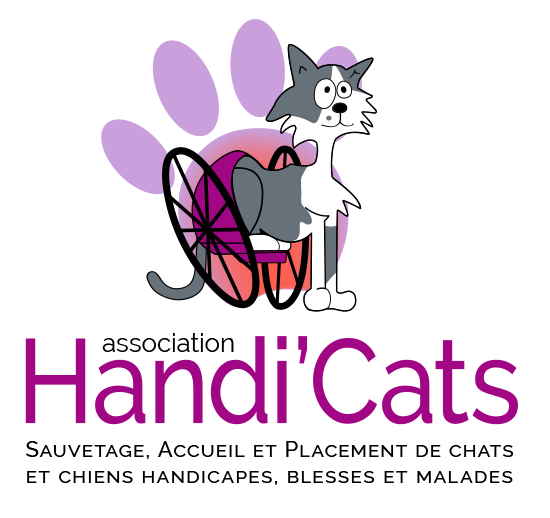
<style>
.page{position:relative;width:550px;height:518px;background:#ffffff}
.page>*{position:absolute;margin:0}
.t1{font:119.1px "Raleway-Medium";color:#a10684;scale:0.87 1}
.t2{font:26.5px "Raleway-Regular";color:#010101}
.t3{font:22.1px "Raleway-Medium";letter-spacing:0.05em;color:#000000;font-variant:small-caps}
.t4{font:22.1px "Raleway-Medium";letter-spacing:0.06em;color:#000000;font-variant:small-caps}
</style>
<div class="page">
<p class="t1" style="left:25px;top:336px;width:493px;height:89px">Handi’Cats</p>
<p class="t2" style="left:102px;top:333px;width:132px;height:19px">association</p>
<p class="t3" style="left:26px;top:441px;width:488px;height:44px">Sauvetage, Accueil et Placement de chats <br><span class="t4">et chiens handicapes, blesses et malades</span></p>
</div>
